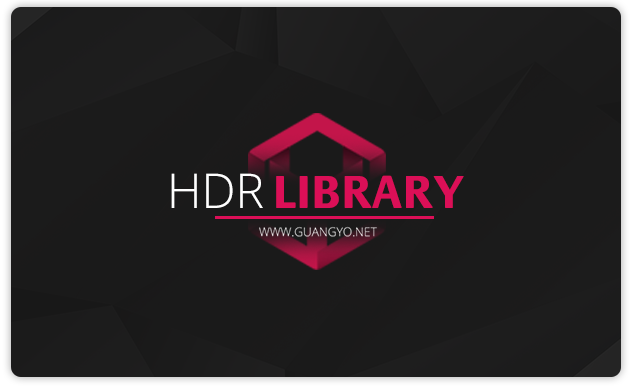
<style>
.page{position:relative;width:634px;height:386px;background:#1a1a1a}
.page>*{position:absolute;margin:0}
.t1{font:48px "Praxis-Bold";color:#db0f57}
.t2{font:48px "OpenSans-Light";color:#ffffff}
</style>
<div class="page">
<p class="t1" style="left:171px;top:173px;width:293px;height:35px"><span class="t2">HDR </span>LIBRARY</p>
</div>
